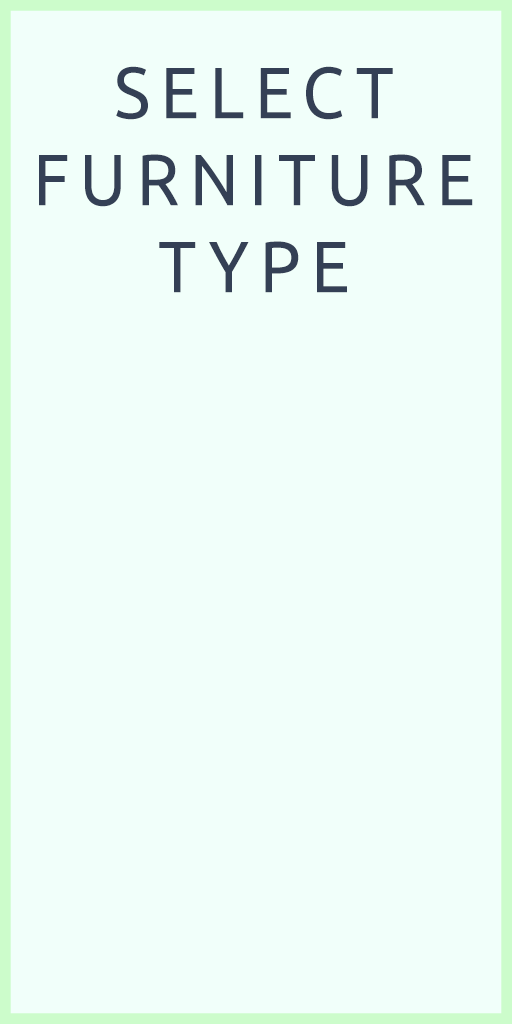
<style>
.page{position:relative;width:512px;height:1024px;background:#f1fffa}
.page>*{position:absolute;margin:0}
.t1{font:72.5px "Ubuntu-Regular";letter-spacing:0.15em;color:#344055;text-transform:uppercase;scale:0.93 1}
</style>
<div class="page">
<p class="t1" style="left:39px;top:66px;width:434px;height:227px;text-align:center">SELECT FURNITURE <br>TYPE</p>
</div>
